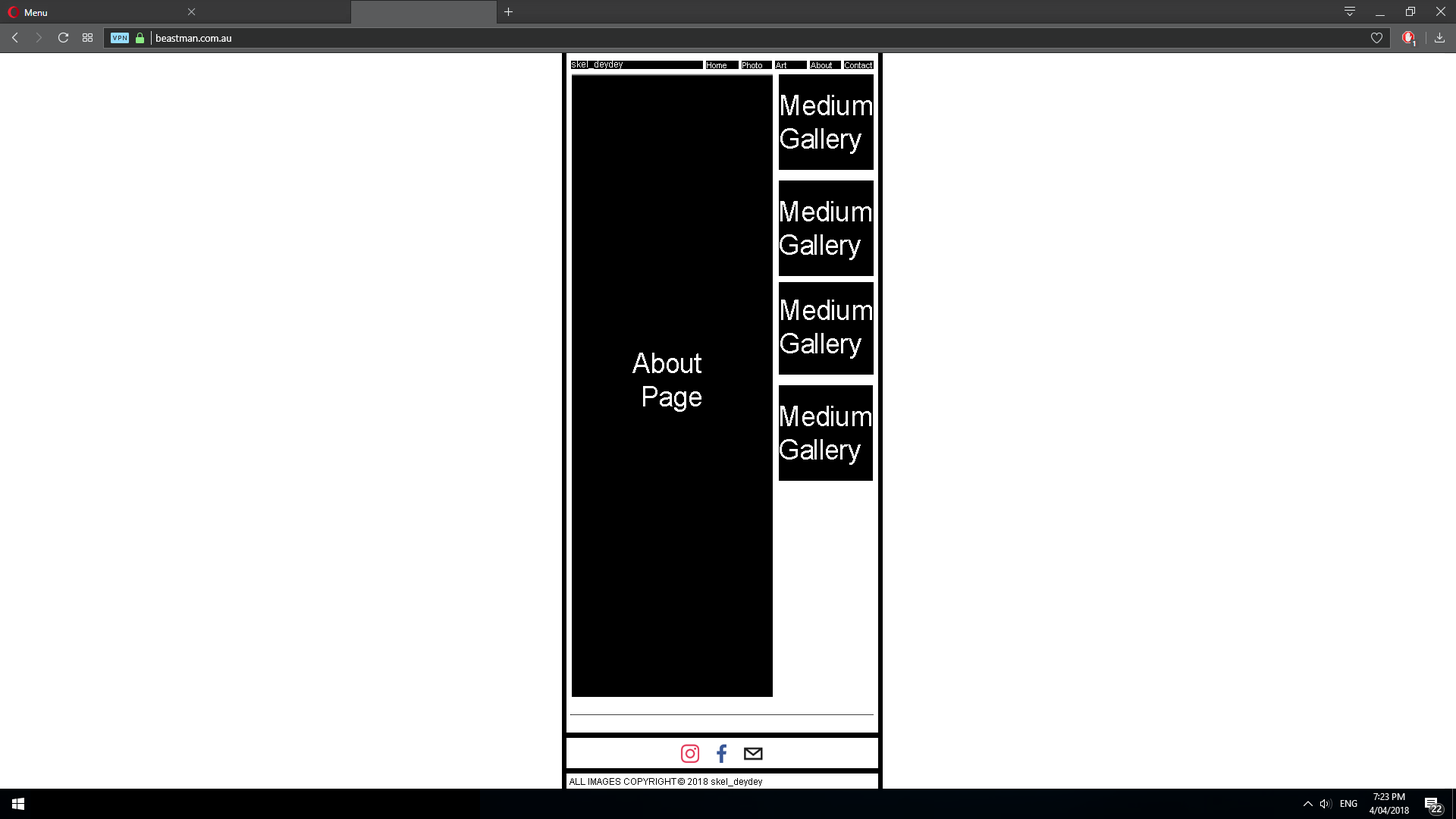
<style>
.page{position:relative;width:1456px;height:819px;background:#ffffff}
.page>*{position:absolute;margin:0}
.t1{font:9.1px "ArialMT";color:#ffffff}
.t2{font:8.3px "ArialMT";color:#ffffff}
.t3{font:27.7px "ArialMT";color:#ffffff}
.t4{font:9.1px "ArialMT";color:#000000}
</style>
<div class="page">
<p class="t1" style="left:572px;top:61px;width:51px;height:8px">skel_deydey</p>
<p class="t2" style="left:707px;top:62px;width:19px;height:6px">Home</p>
<p class="t2" style="left:742px;top:62px;width:20px;height:6px">Photo</p>
<p class="t2" style="left:776px;top:62px;width:10px;height:6px">Art</p>
<p class="t2" style="left:811px;top:62px;width:21px;height:6px">About</p>
<p class="t2" style="left:845px;top:62px;width:27px;height:6px">Contact</p>
<p class="t3" style="left:780px;top:95px;width:92px;height:59px">Medium<br>Gallery</p>
<p class="t3" style="left:780px;top:201px;width:91px;height:59px">Medium<br>Gallery</p>
<p class="t3" style="left:780px;top:300px;width:92px;height:59px">Medium<br>Gallery</p>
<p class="t3" style="left:632px;top:353px;width:69px;height:59px;text-align:center">About <br>Page</p>
<p class="t3" style="left:780px;top:406px;width:91px;height:59px">Medium<br>Gallery</p>
<p class="t4" style="left:570px;top:778px;width:192px;height:8px">ALL IMAGES COPYRIGHT © 2018 skel_deydey</p>
</div>
